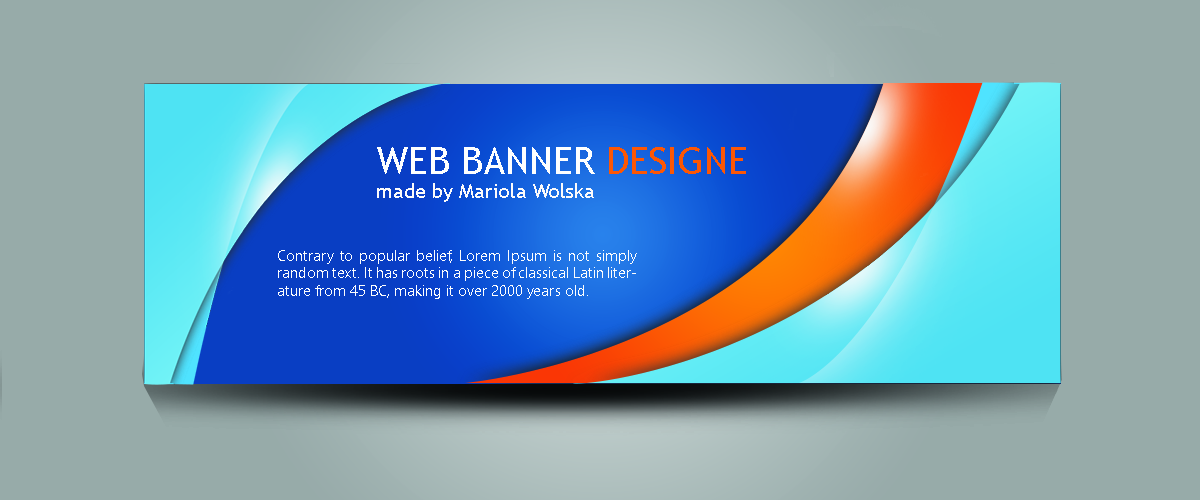
<style>
.page{position:relative;width:1200px;height:500px;background:#97aba9}
.page>*{position:absolute;margin:0}
.t1{font:19.6px "TrebuchetMS";color:#fcfbfb}
.t2{font:37.5px "TrebuchetMS";color:#feffff}
.t3{font:37.5px "TrebuchetMS";color:#fc5705}
.t4{font:14.6px "SegoeUI-Semilight";color:#fcfdfd}
</style>
<div class="page">
<p class="t1" style="left:377px;top:147px;width:369px;height:55px;text-align:justify"><span class="t2">WEB BANNER </span><span class="t3">DESIGNE<br></span>made by Mariola Wolska</p>
<p class="t4" style="left:278px;top:250px;width:359px;height:49px;text-align:justify">Contrary to popular belief, Lorem Ipsum is not simply random text. It has roots in a piece of classical Latin literature from 45 BC, making it over 2000 years old.</p>
</div>
